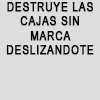
<style>
.page{position:relative;width:100px;height:100px;background:#dedddd}
.page>*{position:absolute;margin:0}
.t1{font:12px "ArialNarrow";letter-spacing:0.06em;color:#000000;font-weight:bold}
</style>
<div class="page">
<p class="t1" style="left:6px;top:2px;width:88px;height:53px;text-align:center">DESTRUYE LAS CAJAS SIN MARCA DESLIZANDOTE</p>
</div>
